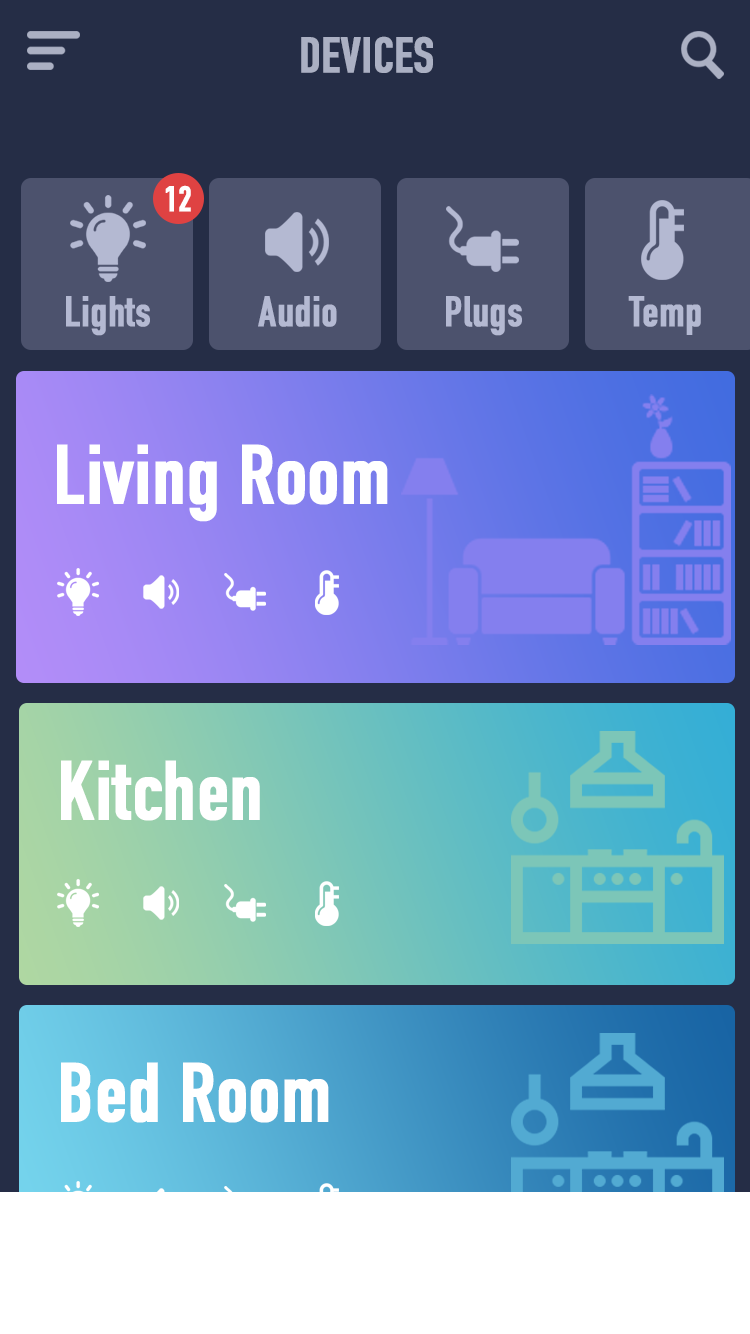
<style>
.page{position:relative;width:750px;height:1334px;background:#252d46}
.page>*{position:absolute;margin:0}
.t1{font:48.9px "DINCondensed-Bold";color:#abb0c3;font-weight:bold}
.t2{font:35px "DINCondensed-Bold";color:#ffffff;font-weight:bold}
.t3{font:42px "DINCondensed-Bold";color:#b4b9d2;font-weight:bold}
.t4{font:82px "DINCondensed-Bold";color:#ffffff;font-weight:bold}
</style>
<div class="page">
<p class="t1" style="left:301px;top:36px;width:132px;height:37px">DEVICES</p>
<p class="t2" style="left:165px;top:185px;width:26px;height:27px">12</p>
<p class="t3" style="left:66px;top:296px;width:84px;height:40px">Lights</p>
<p class="t3" style="left:258px;top:296px;width:79px;height:31px">Audio</p>
<p class="t3" style="left:446px;top:296px;width:76px;height:40px">Plugs</p>
<p class="t3" style="left:628px;top:296px;width:73px;height:39px">Temp</p>
<p class="t4" style="left:57px;top:444px;width:331px;height:78px">Living Room</p>
<p class="t4" style="left:61px;top:760px;width:199px;height:61px">Kitchen</p>
<p class="t4" style="left:61px;top:1062px;width:268px;height:61px">Bed Room</p>
</div>
